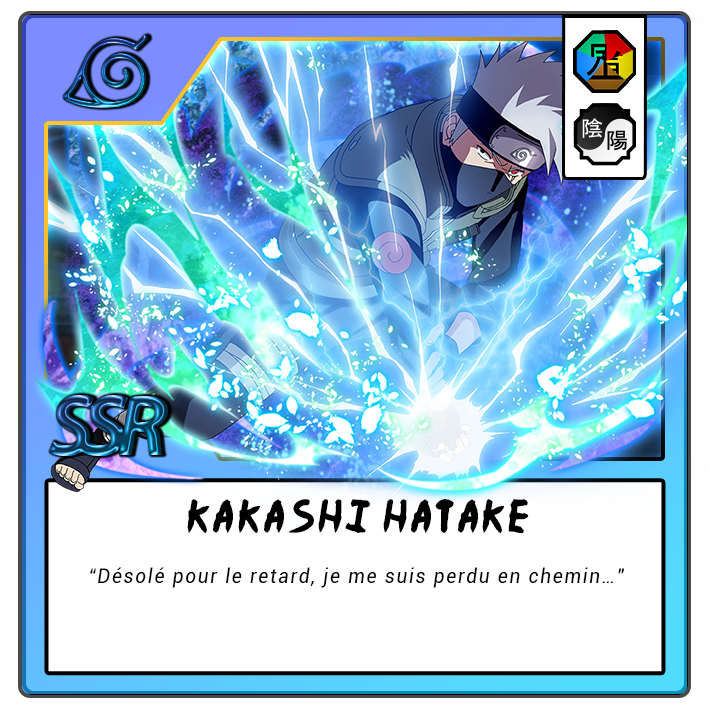
<style>
.page{position:relative;width:709px;height:709px;background:#ffffff}
.page>*{position:absolute;margin:0}
.t1{font:37.5px "Ninja-Naruto";letter-spacing:0.1em;color:#000000}
.t2{font:20.8px "Roboto-Italic";letter-spacing:0.1em;color:#000000;scale:0.9 1}
</style>
<div class="page">
<p class="t1" style="left:187px;top:499px;width:342px;height:35px">Kakashi Hatake</p>
<p class="t2" style="left:90px;top:567px;width:535px;height:21px">“Désolé pour le retard, je me suis perdu en chemin…”</p>
</div>
